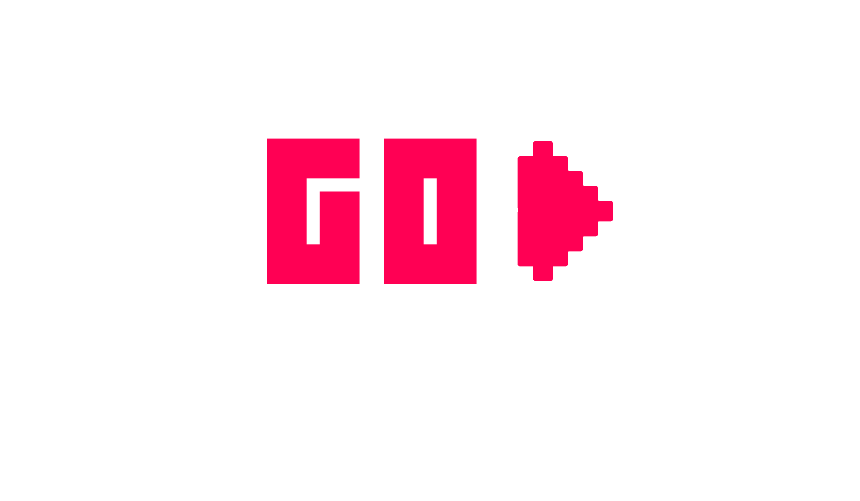
<style>
.page{position:relative;width:860px;height:501px;background:#ffffff}
.page>*{position:absolute;margin:0}
.t1{font:185px "04b19";letter-spacing:0.06em;color:#ff0054}
</style>
<div class="page">
<p class="t1" style="left:267px;top:138px;width:210px;height:146px">GO</p>
</div>
